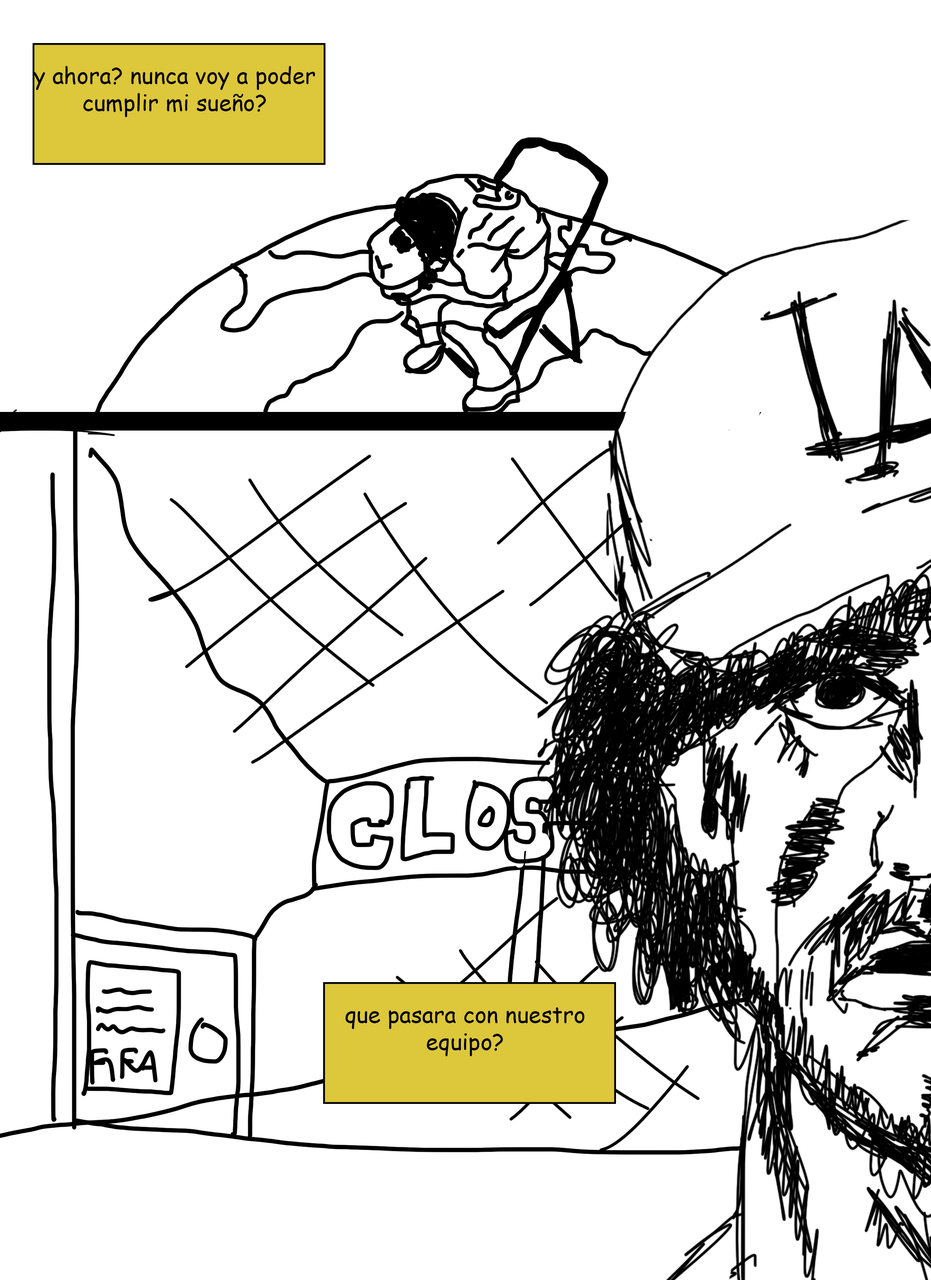
<style>
.page{position:relative;width:931px;height:1280px;background:#ffffff}
.page>*{position:absolute;margin:0}
.t1{font:22.6px "ComicSansMS";color:#000000}
</style>
<div class="page">
<p class="t1" style="left:33px;top:66px;width:282px;height:51px;text-align:center">y ahora? nunca voy a poder cumplir mi sueño?</p>
<p class="t1" style="left:345px;top:1008px;width:240px;height:49px;text-align:center">que pasara con nuestro equipo?</p>
</div>
